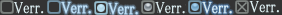
<style>
.page{position:relative;width:282px;height:15px;background:#333333}
.page>*{position:absolute;margin:0}
.t1{font:16.1px "MS-PMincho";color:#dbecef;font-weight:bold;scale:0.81 1}
.t2{font:16.1px "MS-PMincho";color:#c2e1f6;font-weight:bold;scale:0.81 1}
</style>
<div class="page">
<p class="t1" style="left:14px;top:2px;width:30px;height:12px">Verr.</p>
<p class="t2" style="left:61px;top:2px;width:30px;height:12px">Verr.</p>
<p class="t2" style="left:108px;top:3px;width:30px;height:12px">Verr.</p>
<p class="t1" style="left:155px;top:2px;width:30px;height:12px">Verr.</p>
<p class="t1" style="left:202px;top:2px;width:30px;height:12px">Verr.</p>
<p class="t1" style="left:249px;top:1px;width:30px;height:12px">Verr.</p>
</div>
